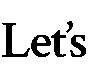
<style>
.page{position:relative;width:88px;height:80px;background:#ffffff}
.page>*{position:absolute;margin:0}
.t1{font:52px "CrimsonText-SemiBold";letter-spacing:-0.025em;color:#000000}
.t2{font:53.3px "CrimsonText-SemiBold";letter-spacing:-0.025em;color:#000000}
</style>
<div class="page">
<p class="t1" style="left:2px;top:21px;width:84px;height:36px"><span class="t2">L</span>et’s</p>
</div>
